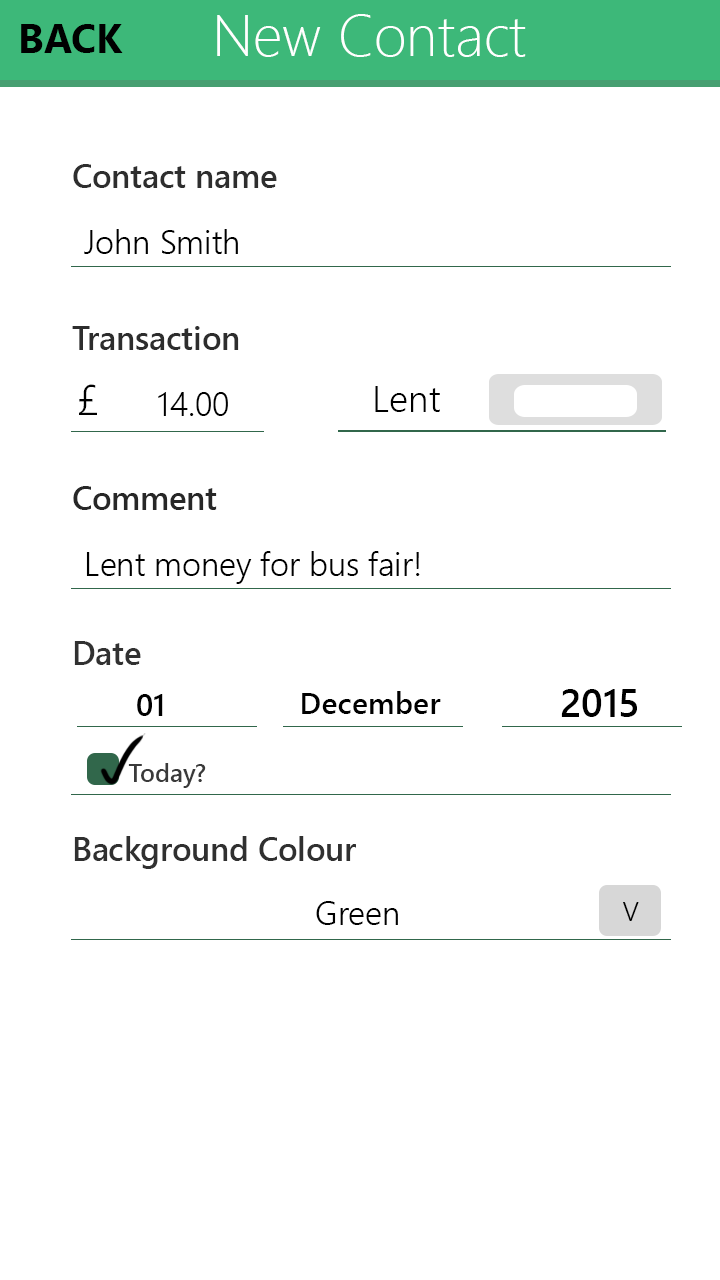
<style>
.page{position:relative;width:720px;height:1280px;background:#ffffff}
.page>*{position:absolute;margin:0}
.t1{font:58.2px "SegoeUI-Light";color:#ffffff}
.t2{font:39.9px "SegoeUI-Bold";color:#000000}
.t3{font:32.5px "SegoeUI-Semibold";color:#2e2e2e}
.t4{font:32.9px "SegoeUI-Semilight";color:#000000}
.t5{font:32.5px "SegoeUI-Semibold";color:#2d2d2d}
.t6{font:42.6px "SegoeUI-Semilight";color:#000000}
.t7{font:37.1px "SegoeUI-Semilight";color:#000000}
.t8{font:32.5px "SegoeUI-Semibold";color:#272727}
.t9{font:32.5px "SegoeUI-Semibold";color:#313131}
.t10{font:38.8px "SegoeUI-Semibold";color:#000000}
.t11{font:30.7px "SegoeUI-Semibold";color:#000000}
.t12{font:30.4px "SegoeUI-Semibold";color:#000000}
.t13{font:25px "SegoeUI-Semibold";color:#3a3a3a}
.t14{font:32.5px "SegoeUI-Semibold";color:#313030}
.t15{font:27.2px "SegoeUI-Semilight";color:#010101}
</style>
<div class="page">
<p class="t1" style="left:217px;top:14px;width:309px;height:43px">New Contact</p>
<p class="t2" style="left:21px;top:24px;width:102px;height:29px">BACK</p>
<p class="t3" style="left:73px;top:164px;width:204px;height:24px">Contact name</p>
<p class="t4" style="left:84px;top:229px;width:154px;height:25px">John Smith</p>
<p class="t5" style="left:72px;top:326px;width:167px;height:24px">Transaction</p>
<p class="t6" style="left:79px;top:384px;width:18px;height:31px">£</p>
<p class="t7" style="left:375px;top:386px;width:65px;height:26px">Lent</p>
<p class="t4" style="left:158px;top:392px;width:70px;height:24px">14.00</p>
<p class="t8" style="left:73px;top:486px;width:144px;height:24px">Comment</p>
<p class="t4" style="left:86px;top:551px;width:334px;height:33px">Lent money for bus fair!</p>
<p class="t9" style="left:74px;top:641px;width:67px;height:24px">Date</p>
<p class="t10" style="left:561px;top:689px;width:76px;height:28px">2015</p>
<p class="t11" style="left:137px;top:694px;width:26px;height:22px">01</p>
<p class="t12" style="left:302px;top:691px;width:139px;height:23px">December</p>
<p class="t13" style="left:128px;top:763px;width:78px;height:25px">Today?</p>
<p class="t14" style="left:74px;top:836px;width:282px;height:33px">Background Colour</p>
<p class="t4" style="left:316px;top:901px;width:82px;height:24px">Green</p>
<p class="t15" style="left:623px;top:902px;width:16px;height:19px">V</p>
</div>
